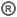
<style>
.page{position:relative;width:17px;height:17px;background:#ffffff}
.page>*{position:absolute;margin:0}
.t1{font:9px "Arial-BoldMT";color:#606460}
</style>
<div class="page">
<p class="t1" style="left:5px;top:5px;width:6px;height:13px">R</p>
</div>
